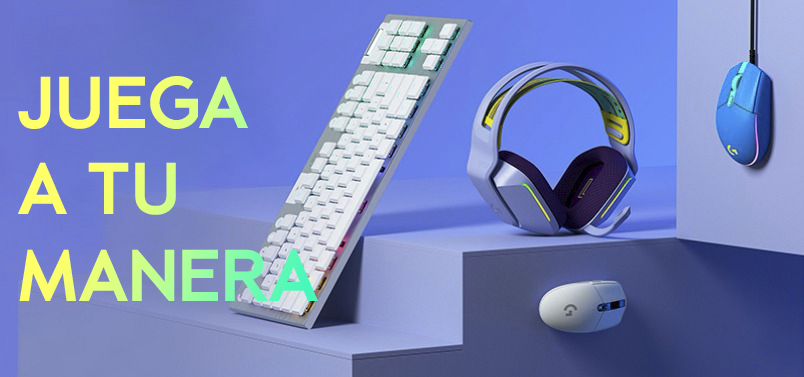
<style>
.page{position:relative;width:804px;height:377px}
.page>*{position:absolute;margin:0}
.t1{font:72px "-OCFormatShards-Regular"}
</style>
<div class="page">
<p class="t1" style="left:18px;top:76px;width:300px;height:225px">JUEGA<br>A TU<br>MANERA</p>
</div>
